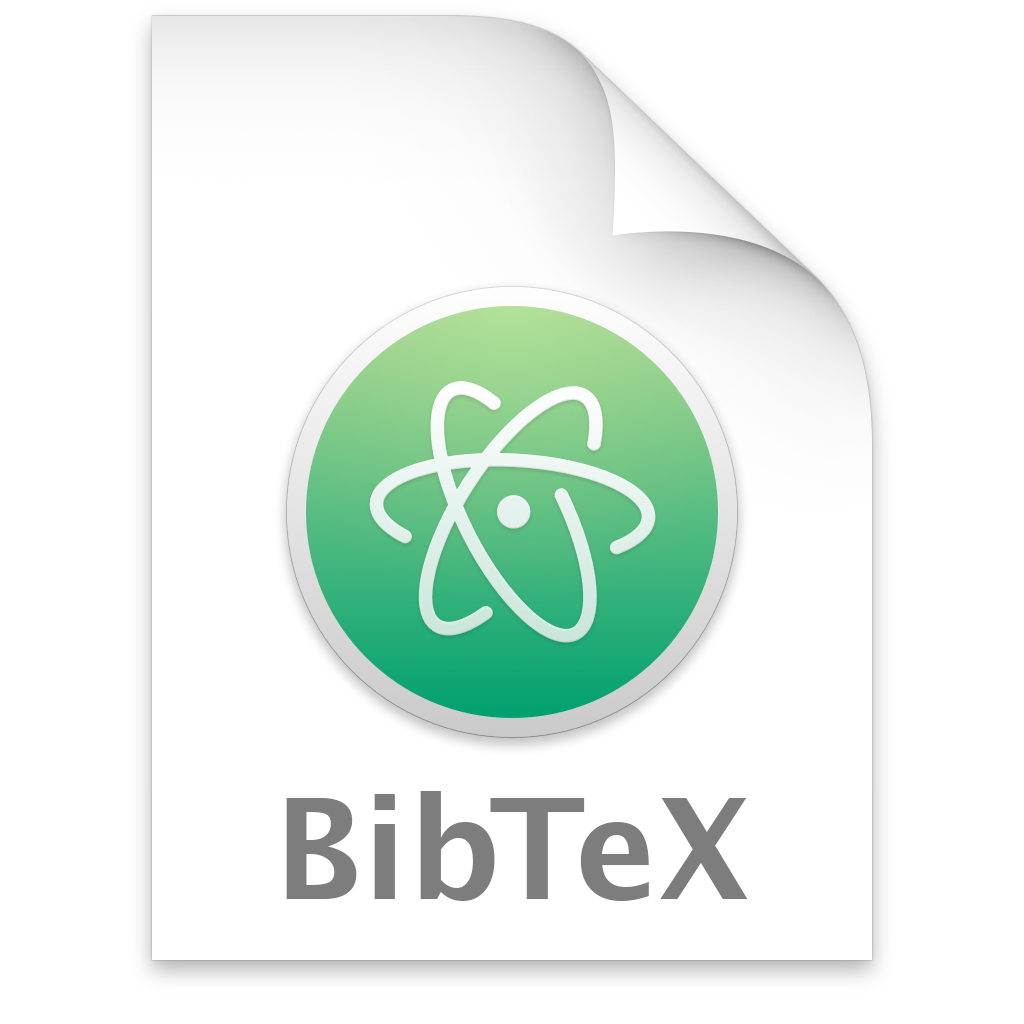
<style>
.page{position:relative;width:1024px;height:1024px;background:#ffffff}
.page>*{position:absolute;margin:0}
.t1{font:140px "LucidaGrande-Bold";color:#7d7d7d}
.t2{font:140px "LucidaGrande-Bold";letter-spacing:-0.08em;color:#7d7d7d}
</style>
<div class="page">
<p class="t1" style="left:286px;top:791px;width:462px;height:110px">Bi<span class="t2">bT</span>eX</p>
</div>
